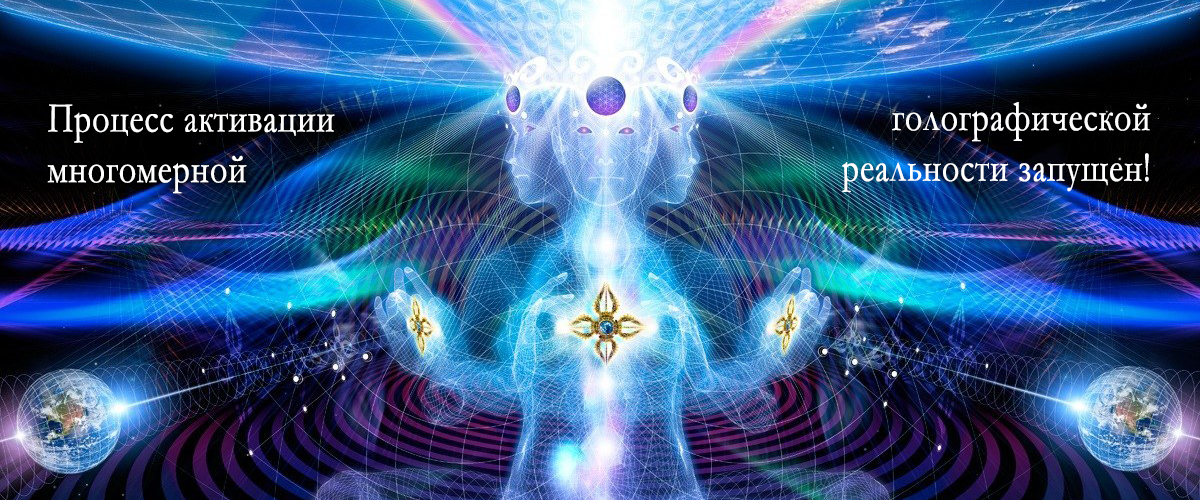
<style>
.page{position:relative;width:1200px;height:500px}
.page>*{position:absolute;margin:0}
.t1{font:42.2px "Garamond";color:#ffffff;font-weight:bold;scale:0.8 1}
</style>
<div class="page">
<p class="t1" style="left:842px;top:102px;width:309px;height:90px;text-align:right">голографической<br>реальности запущен!</p>
<p class="t1" style="left:47px;top:104px;width:288px;height:90px">Процесс активации<br>многомерной</p>
</div>
